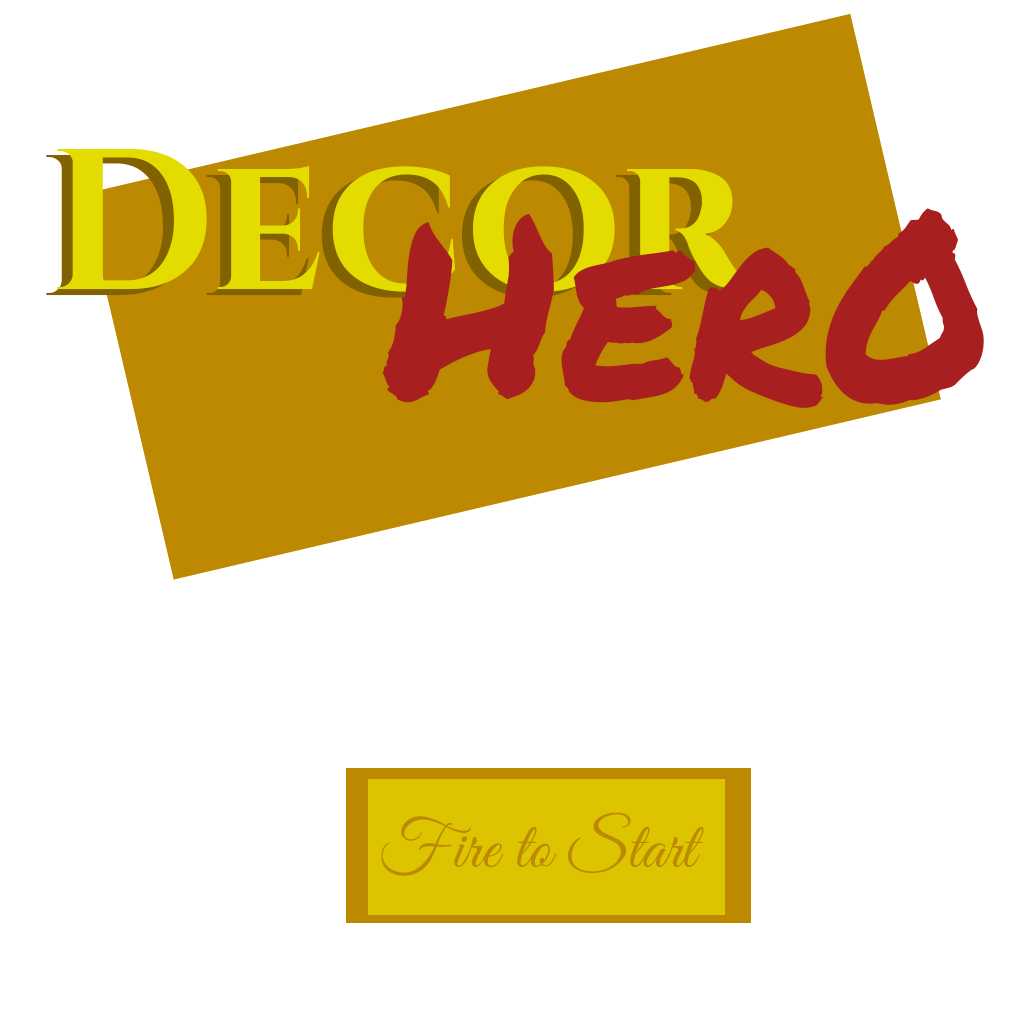
<style>
.page{position:relative;width:1024px;height:1024px;background:#ffffff}
.page>*{position:absolute;margin:0}
.t1{font:200px "Cinzel-Bold";color:#e4dc00}
.t2{font:250px "PermanentMarker-Regular";color:#a81f1f}
.t3{font:66.7px "GreatVibes-Regular";color:#bc8900}
</style>
<div class="page">
<p class="t1" style="left:57px;top:149px;width:702px;height:143px">Decor</p>
<p class="t2" style="left:382px;top:208px;width:602px;height:200px">Her0</p>
<p class="t3" style="left:381px;top:812px;width:323px;height:64px">Fire to Start</p>
</div>
